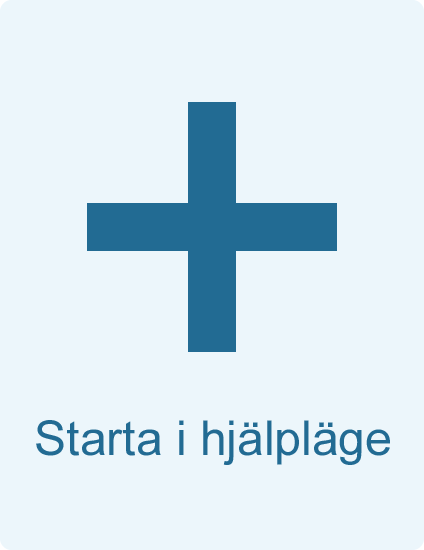
<style>
.page{position:relative;width:424px;height:550px;background:#ecf6fb}
.page>*{position:absolute;margin:0}
.t1{font:48px "ArialMT";color:#226b93}
</style>
<div class="page">
<p class="t1" style="left:36px;top:420px;width:354px;height:45px">Starta i hjälpläge</p>
</div>
